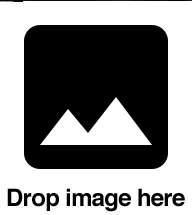
<style>
.page{position:relative;width:192px;height:215px;background:#ffffff}
.page>*{position:absolute;margin:0}
.t1{font:24px "Helvetica-Bold";letter-spacing:-0.03em;color:#000000}
</style>
<div class="page">
<p class="t1" style="left:7px;top:187px;width:178px;height:24px">Drop image here</p>
</div>
